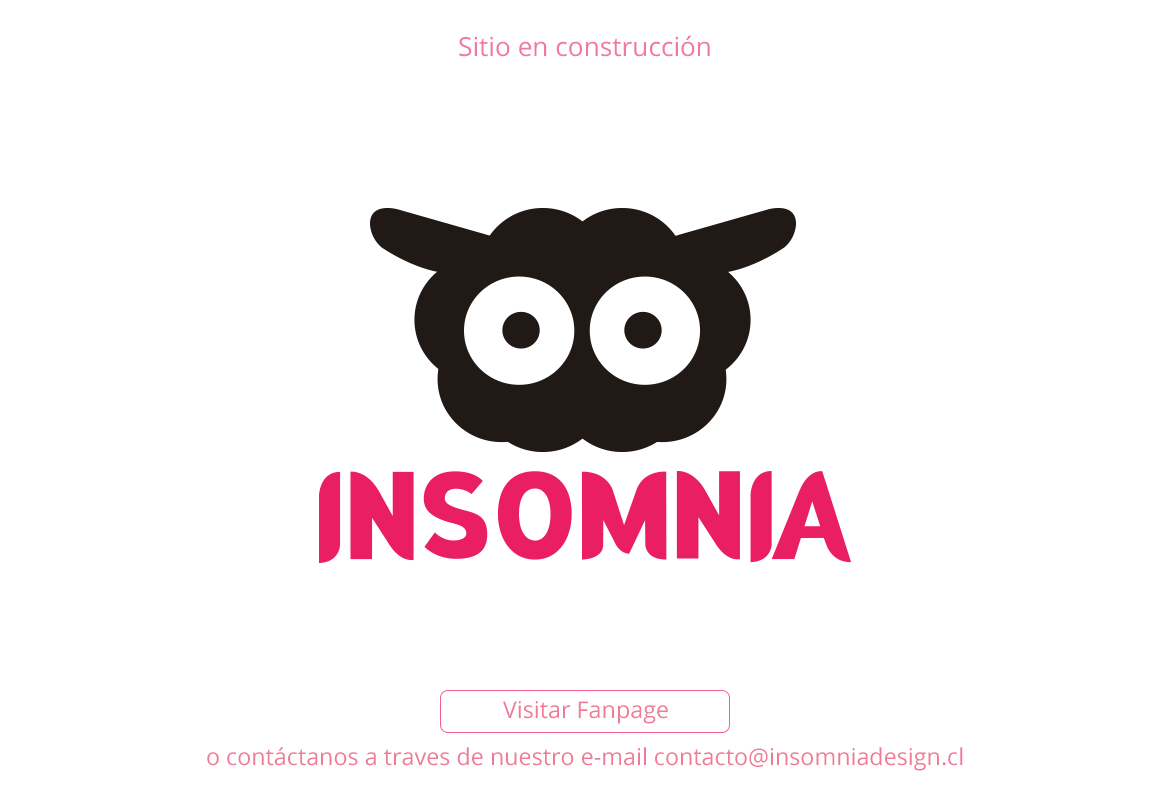
<style>
.page{position:relative;width:1170px;height:800px;background:#ffffff}
.page>*{position:absolute;margin:0}
.t1{font:26.2px "OpenSans";color:#f07a9a}
.t2{font:23.3px "OpenSans";color:#f07a9a}
</style>
<div class="page">
<p class="t1" style="left:459px;top:35px;width:251px;height:22px">Sitio en construcción</p>
<p class="t2" style="left:503px;top:701px;width:165px;height:23px">Visitar Fanpage</p>
<p class="t2" style="left:207px;top:747px;width:756px;height:24px">o contáctanos a traves de nuestro e-mail contacto@insomniadesign.cl</p>
</div>
